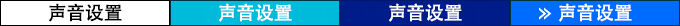
<style>
.page{position:relative;width:680px;height:26px;background:#ffffff}
.page>*{position:absolute;margin:0}
.t1{font:18.7px "AdobeHeitiStd-Regular";color:#000000}
.t2{font:18.7px "AdobeHeitiStd-Regular";color:#ffffff}
</style>
<div class="page">
<p class="t1" style="left:49px;top:3px;width:73px;height:19px">声音设置</p>
<p class="t2" style="left:219px;top:3px;width:73px;height:19px">声音设置</p>
<p class="t2" style="left:389px;top:3px;width:73px;height:19px">声音设置</p>
<p class="t2" style="left:559px;top:3px;width:73px;height:19px">声音设置</p>
</div>
